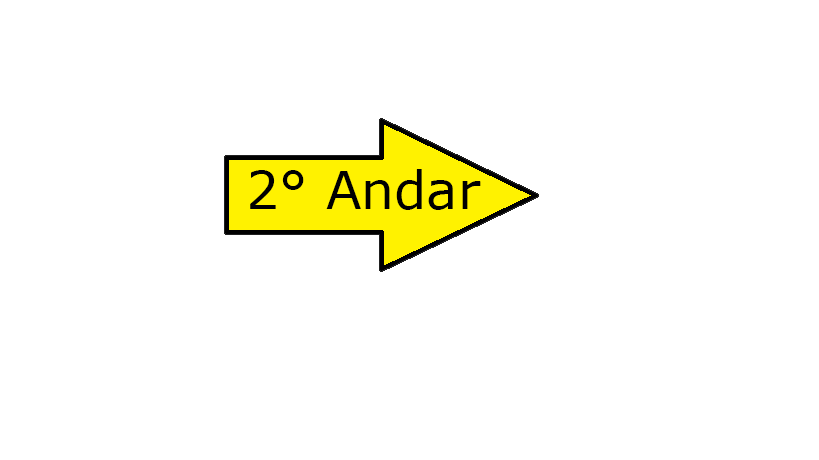
<style>
.page{position:relative;width:819px;height:460px;background:#ffffff}
.page>*{position:absolute;margin:0}
.t1{font:52px "MSReferenceSansSerif";color:#000000}
</style>
<div class="page">
<p class="t1" style="left:250px;top:169px;width:231px;height:41px">2° Andar</p>
</div>
